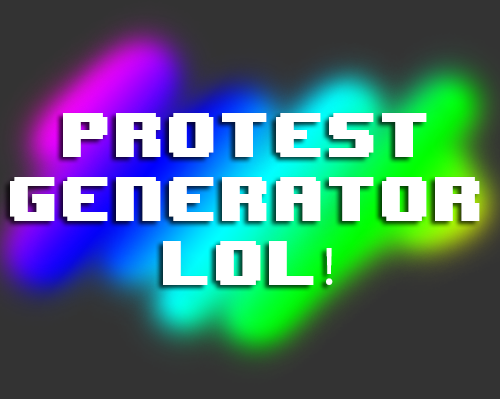
<style>
.page{position:relative;width:500px;height:399px;background:#333333}
.page>*{position:absolute;margin:0}
.t1{font:53.3px "8BITWONDERNominal";color:#ffffff}
.t2{font:53.3px "MyriadPro-Regular";color:#ffffff}
</style>
<div class="page">
<p class="t1" style="left:10px;top:113px;width:470px;height:172px;text-align:center">PROTEST<br>GENERATOR<br>LOL<span class="t2">!</span></p>
</div>
